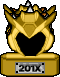
<style>
.page{position:relative;width:60px;height:77px;background:#000000}
.page>*{position:absolute;margin:0}
.t1{font:9.5px "InterTight-Black";letter-spacing:-0.04em;color:#000000}
</style>
<div class="page">
<p class="t1" style="left:18px;top:64px;width:24px;height:8px">201X</p>
</div>
